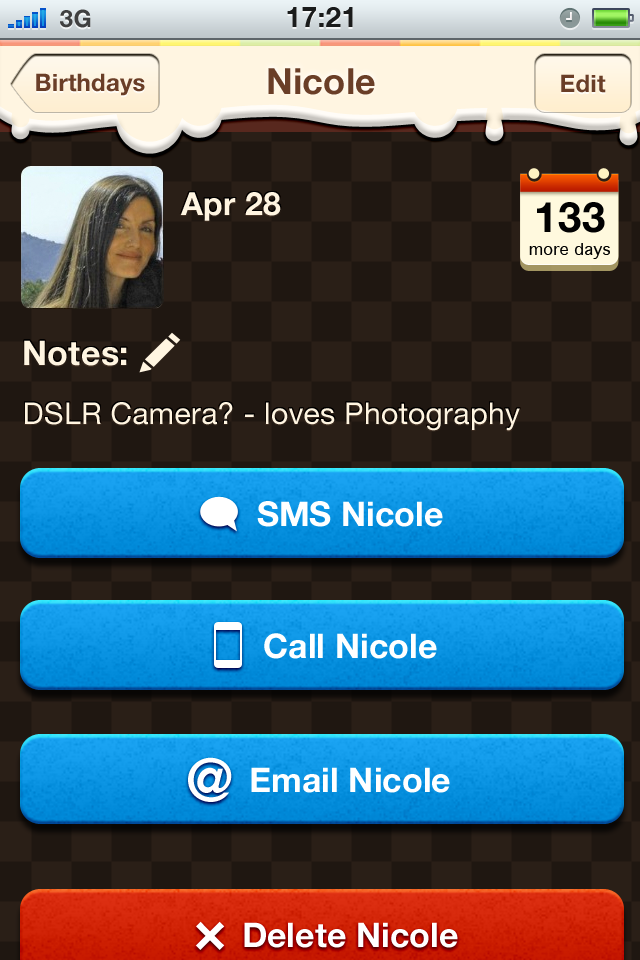
<style>
.page{position:relative;width:640px;height:960px;background:#2a1f17}
.page>*{position:absolute;margin:0}
.t1{font:24px "HelveticaNeue-Bold";color:#404040;text-transform:uppercase}
.t2{font:28px "HelveticaNeue-Bold";color:#1a1b1b;text-transform:uppercase}
.t3{font:24px "HelveticaNeue-Bold";letter-spacing:0.01em;color:#6a3e27}
.t4{font:36px "HelveticaNeue-Bold";letter-spacing:0.01em;color:#6a3e27}
.t5{font:32px "HelveticaNeue-Bold";letter-spacing:0.01em;color:#fff5e1}
.t6{font:42px "HelveticaNeue-Bold";letter-spacing:0.01em;color:#010101}
.t7{font:16px "GenevaCY";letter-spacing:0.01em;color:#000000}
.t8{font:34px "HelveticaNeue-Bold";letter-spacing:0.01em;color:#fff5e1}
.t9{font:30px "HelveticaNeue";letter-spacing:0.01em;color:#fff5e1}
.t10{font:34px "HelveticaNeue-Bold";color:#ffffff}
.t11{font:59.3px "HelveticaNeue-Bold";color:#ffffff}
.t12{font:60px "HelveticaNeue-Bold";color:#ffffff}
</style>
<div class="page">
<p class="t1" style="left:60px;top:9px;width:31px;height:19px">3G</p>
<p class="t2" style="left:287px;top:7px;width:66px;height:20px">17:21</p>
<p class="t3" style="left:36px;top:73px;width:109px;height:23px">Birthdays</p>
<p class="t4" style="left:268px;top:68px;width:107px;height:27px">Nicole</p>
<p class="t3" style="left:561px;top:74px;width:45px;height:19px">Edit</p>
<p class="t5" style="left:180px;top:192px;width:101px;height:29px">Apr 28</p>
<p class="t6" style="left:537px;top:202px;width:68px;height:31px">133</p>
<p class="t7" style="left:529px;top:243px;width:81px;height:16px">more days</p>
<p class="t8" style="left:24px;top:340px;width:103px;height:26px">Notes:</p>
<p class="t9" style="left:25px;top:402px;width:495px;height:29px">DSLR Camera? - loves Photography</p>
<p class="t10" style="left:257px;top:501px;width:186px;height:26px">SMS Nicole</p>
<p class="t10" style="left:264px;top:633px;width:173px;height:26px">Call Nicole</p>
<p class="t11" style="left:188px;top:757px;width:44px;height:45px">@</p>
<p class="t10" style="left:251px;top:767px;width:199px;height:26px">Email Nicole</p>
<p class="t12" style="left:195px;top:921px;width:30px;height:29px">×</p>
<p class="t10" style="left:244px;top:922px;width:214px;height:26px">Delete Nicole</p>
</div>
